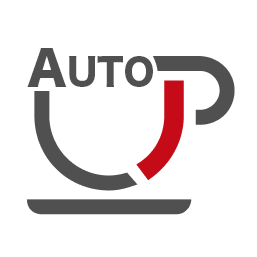
<style>
.page{position:relative;width:257px;height:257px;background:#ffffff}
.page>*{position:absolute;margin:0}
.t1{font:36px "HiraKakuStd-W8";color:#505050;scale:0.95 1}
.t2{font:48px "HiraKakuStd-W8";color:#505050;scale:0.95 1}
</style>
<div class="page">
<p class="t1" style="left:27px;top:48px;width:126px;height:39px"><span class="t2">A</span>UTO</p>
</div>
